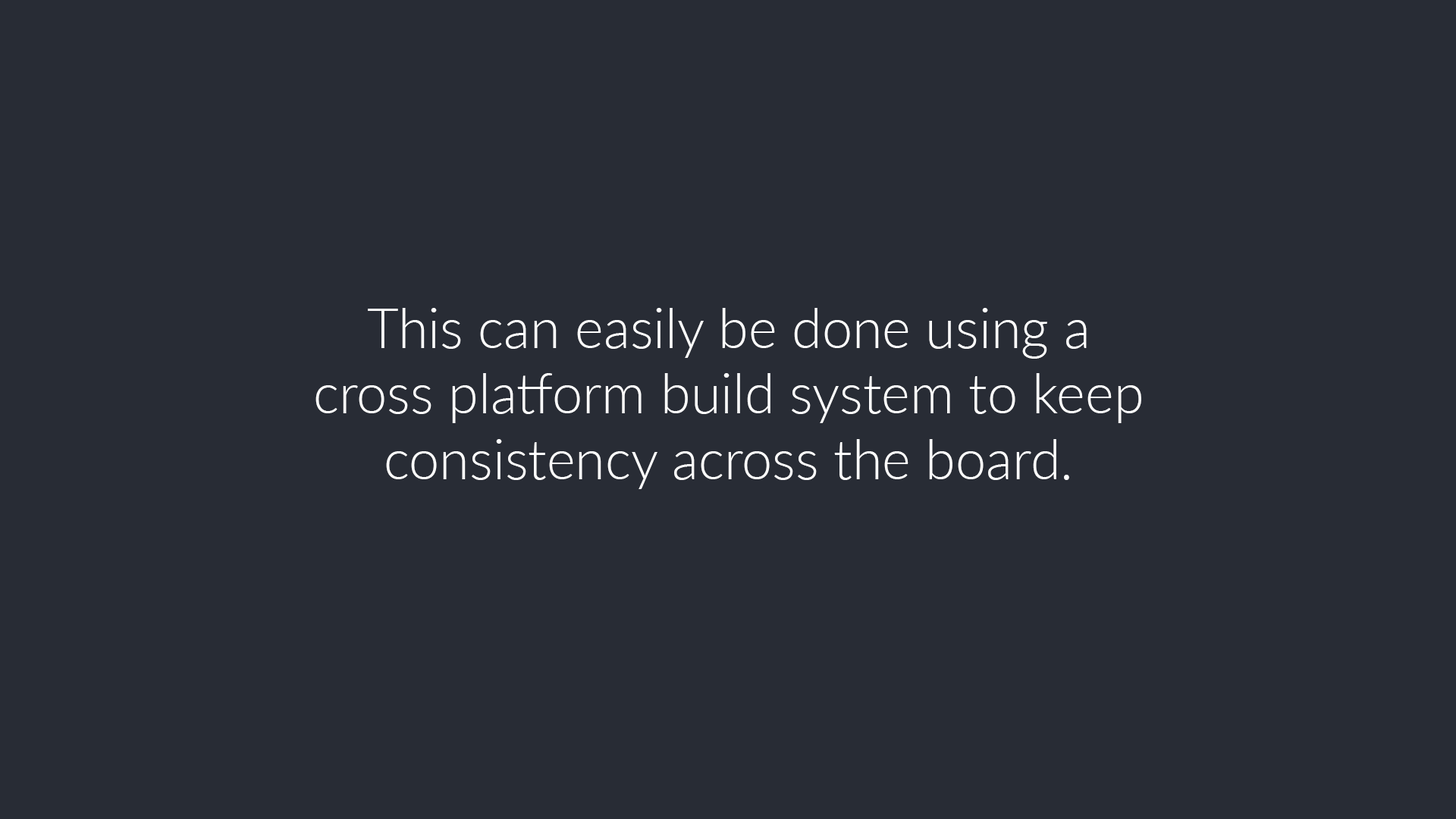
<style>
.page{position:relative;width:1456px;height:819px;background:#282c35}
.page>*{position:absolute;margin:0}
.t1{font:54.6px "Lato-Light";color:#ffffff}
</style>
<div class="page">
<p class="t1" style="left:315px;top:308px;width:826px;height:181px;text-align:center">This can easily be done using a cross platform build system to keep consistency across the board.</p>
</div>
